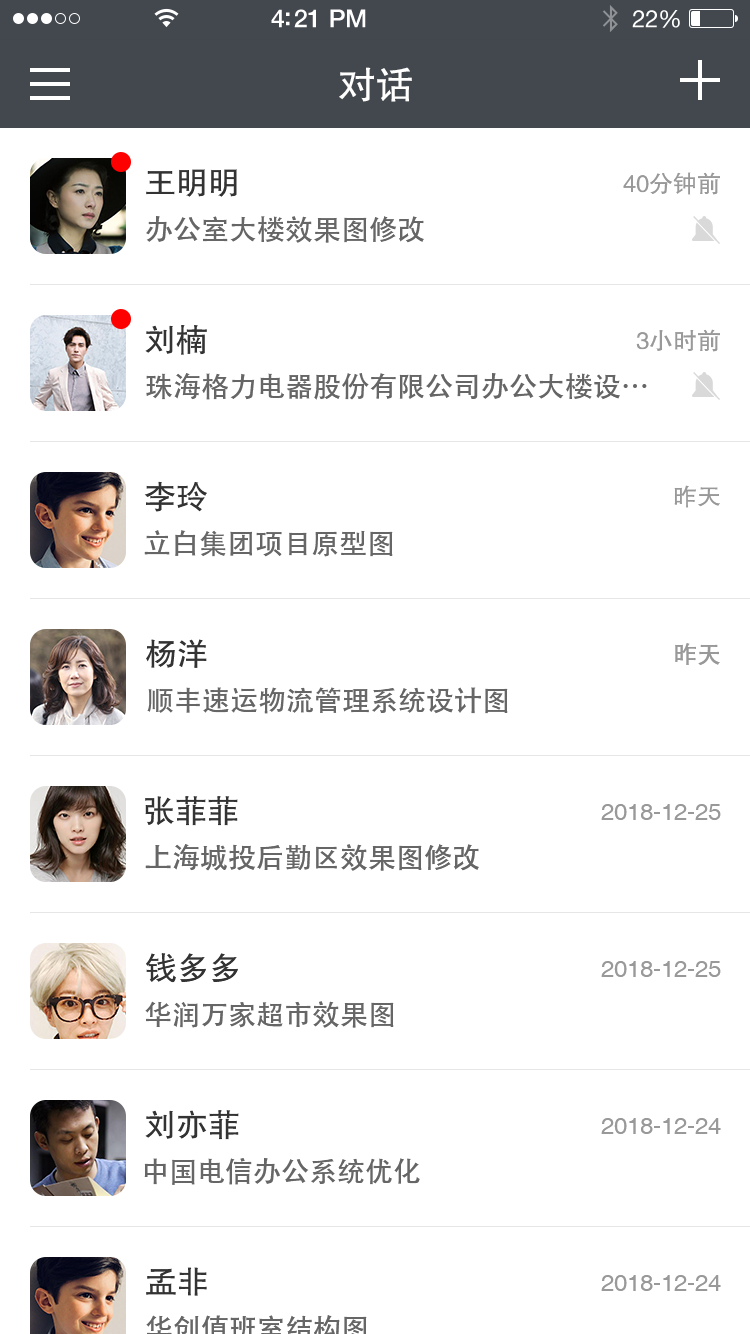
<style>
.page{position:relative;width:750px;height:1334px;background:#ffffff}
.page>*{position:absolute;margin:0}
.t1{font:38px "FZHTJW--GB1-0";color:#ffffff}
.t2{font:32px "FZHTJW--GB1-0";color:#333333}
.t3{font:24px "FZHTJW--GB1-0";color:#999999}
.t4{font:28px "AdobeHeitiStd-Regular";color:#666666}
.t5{font:24px "AdobeHeitiStd-Regular";color:#999999}
.t6{font:24px "Helvetica";color:#999999}
</style>
<div class="page">
<p class="t1" style="left:339px;top:67px;width:73px;height:35px">对话</p>
<p class="t2" style="left:146px;top:169px;width:91px;height:28px">王明明</p>
<p class="t3" style="left:623px;top:172px;width:97px;height:23px">40分钟前</p>
<p class="t4" style="left:146px;top:216px;width:278px;height:27px">办公室大楼效果图修改</p>
<p class="t2" style="left:145px;top:325px;width:62px;height:30px">刘楠</p>
<p class="t3" style="left:636px;top:329px;width:84px;height:23px">3小时前</p>
<p class="t4" style="left:146px;top:373px;width:501px;height:27px">珠海格力电器股份有限公司办公大楼设…</p>
<p class="t2" style="left:144px;top:481px;width:63px;height:31px">李玲</p>
<p class="t3" style="left:674px;top:485px;width:46px;height:23px">昨天</p>
<p class="t4" style="left:144px;top:530px;width:249px;height:27px">立白集团项目原型图</p>
<p class="t2" style="left:146px;top:639px;width:61px;height:29px">杨洋</p>
<p class="t5" style="left:675px;top:643px;width:45px;height:22px">昨天</p>
<p class="t4" style="left:147px;top:687px;width:361px;height:27px">顺丰速运物流管理系统设计图</p>
<p class="t2" style="left:145px;top:796px;width:93px;height:30px">张菲菲</p>
<p class="t6" style="left:601px;top:804px;width:120px;height:16px">2018-12-25</p>
<p class="t4" style="left:145px;top:844px;width:334px;height:27px">上海城投后勤区效果图修改</p>
<p class="t2" style="left:146px;top:953px;width:92px;height:30px">钱多多</p>
<p class="t6" style="left:601px;top:961px;width:120px;height:16px">2018-12-25</p>
<p class="t4" style="left:145px;top:1001px;width:249px;height:27px">华润万家超市效果图</p>
<p class="t2" style="left:145px;top:1110px;width:94px;height:30px">刘亦菲</p>
<p class="t6" style="left:601px;top:1118px;width:120px;height:16px">2018-12-24</p>
<p class="t4" style="left:144px;top:1158px;width:276px;height:27px">中国电信办公系统优化</p>
<p class="t2" style="left:146px;top:1267px;width:61px;height:29px">孟非</p>
<p class="t6" style="left:601px;top:1275px;width:120px;height:16px">2018-12-24</p>
</div>
